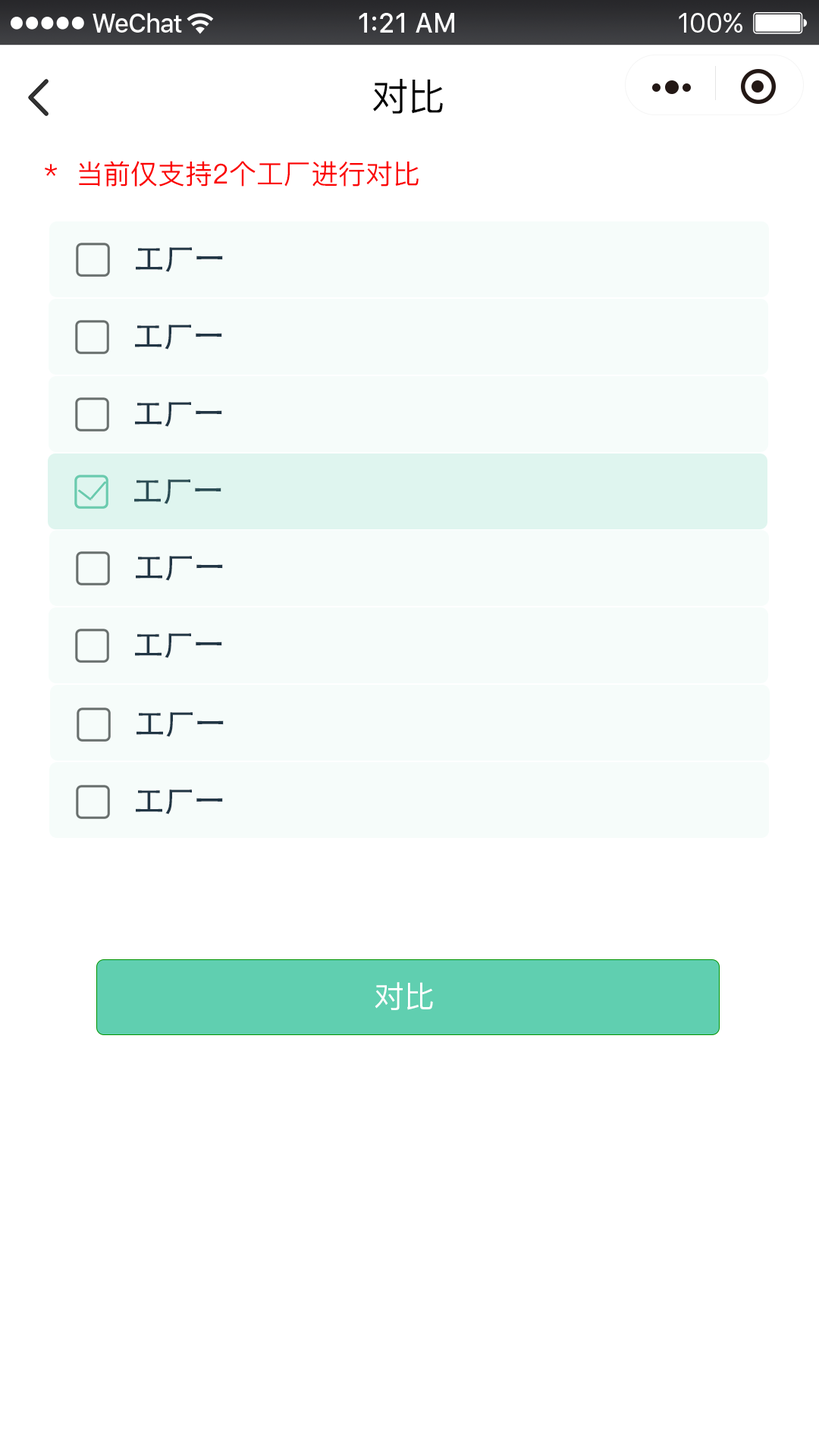
<style>
.page{position:relative;width:819px;height:1456px;background:#ffffff}
.page>*{position:absolute;margin:0}
.t1{font:37.9px "PingFangSC-Regular";color:#000000}
.t2{font:27.3px "PingFangSC-Regular";color:#fb0303}
.t3{font:27.3px "PingFangSC-Regular";color:#000000}
.t4{font:30.3px "AdobeHeitiStd-Regular";color:#1e2c3e}
.t5{font:30.3px "AdobeHeitiStd-Regular";color:#2b4d55}
.t6{font:30.3px "PingFangSC-Regular";color:#ffffff}
</style>
<div class="page">
<p class="t1" style="left:373px;top:79px;width:70px;height:35px">对比</p>
<p class="t2" style="left:45px;top:161px;width:374px;height:26px"><span class="t3">  </span>*  当前仅支持2个工厂进行对比</p>
<p class="t4" style="left:136px;top:247px;width:87px;height:25px">工厂一</p>
<p class="t4" style="left:135px;top:325px;width:87px;height:25px">工厂一</p>
<p class="t4" style="left:135px;top:402px;width:87px;height:25px">工厂一</p>
<p class="t5" style="left:134px;top:479px;width:87px;height:25px">工厂一</p>
<p class="t4" style="left:136px;top:556px;width:87px;height:25px">工厂一</p>
<p class="t4" style="left:135px;top:633px;width:87px;height:25px">工厂一</p>
<p class="t4" style="left:136px;top:712px;width:88px;height:25px">工厂一</p>
<p class="t4" style="left:136px;top:789px;width:87px;height:25px">工厂一</p>
<p class="t6" style="left:375px;top:982px;width:58px;height:28px">对比</p>
</div>
